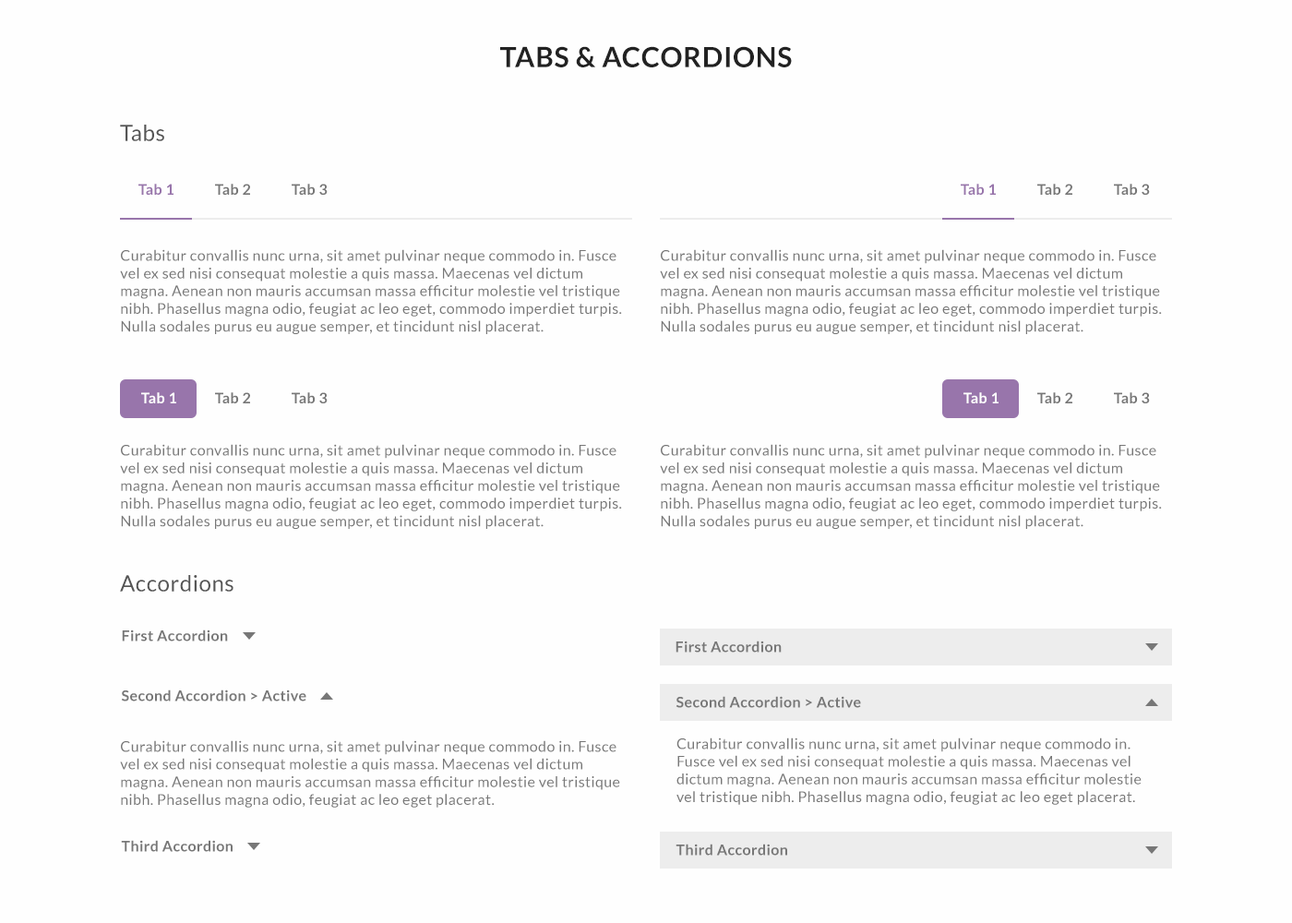
<style>
.page{position:relative;width:1292px;height:923px;background:#fefefe}
.page>*{position:absolute;margin:0}
.t1{font:27.7px "Lato-Bold";letter-spacing:0.025em;color:#222222}
.t2{font:22.1px "Lato-Regular";letter-spacing:0.025em;color:#555555}
.t3{font:14.8px "Lato-Bold";letter-spacing:0.025em;color:#9875ab}
.t4{font:14.8px "Lato-Bold";letter-spacing:0.025em;color:#777777}
.t5{font:14.8px "Lato-Regular";letter-spacing:0.025em;color:#777777}
.t6{font:14.8px "Lato-Bold";letter-spacing:0.025em;color:#ffffff}
</style>
<div class="page">
<p class="t1" style="left:500px;top:46px;width:292px;height:21px">TABS &amp; ACCORDIONS</p>
<p class="t2" style="left:120px;top:125px;width:44px;height:16px">Tabs</p>
<p class="t3" style="left:138px;top:184px;width:36px;height:11px">Tab 1</p>
<p class="t4" style="left:215px;top:184px;width:35px;height:11px">Tab 2</p>
<p class="t4" style="left:292px;top:184px;width:36px;height:11px">Tab 3</p>
<p class="t3" style="left:961px;top:184px;width:35px;height:11px">Tab 1</p>
<p class="t4" style="left:1037px;top:184px;width:35px;height:11px">Tab 2</p>
<p class="t4" style="left:1114px;top:184px;width:36px;height:11px">Tab 3</p>
<p class="t5" style="left:120px;top:249px;width:502px;height:85px">Curabitur convallis nunc urna, sit amet pulvinar neque commodo in. Fusce vel ex sed nisi consequat molestie a quis massa. Maecenas vel dictum magna. Aenean non mauris accumsan massa efficitur molestie vel tristique nibh. Phasellus magna odio, feugiat ac leo eget, commodo imperdiet turpis. Nulla sodales purus eu augue semper, et tincidunt nisl placerat.</p>
<p class="t5" style="left:660px;top:249px;width:502px;height:85px">Curabitur convallis nunc urna, sit amet pulvinar neque commodo in. Fusce vel ex sed nisi consequat molestie a quis massa. Maecenas vel dictum magna. Aenean non mauris accumsan massa efficitur molestie vel tristique nibh. Phasellus magna odio, feugiat ac leo eget, commodo imperdiet turpis. Nulla sodales purus eu augue semper, et tincidunt nisl placerat.</p>
<p class="t6" style="left:141px;top:392px;width:35px;height:11px">Tab 1</p>
<p class="t4" style="left:215px;top:392px;width:35px;height:11px">Tab 2</p>
<p class="t4" style="left:292px;top:392px;width:36px;height:11px">Tab 3</p>
<p class="t6" style="left:964px;top:392px;width:35px;height:11px">Tab 1</p>
<p class="t4" style="left:1037px;top:392px;width:35px;height:11px">Tab 2</p>
<p class="t4" style="left:1114px;top:392px;width:36px;height:11px">Tab 3</p>
<p class="t5" style="left:120px;top:444px;width:502px;height:85px">Curabitur convallis nunc urna, sit amet pulvinar neque commodo in. Fusce vel ex sed nisi consequat molestie a quis massa. Maecenas vel dictum magna. Aenean non mauris accumsan massa efficitur molestie vel tristique nibh. Phasellus magna odio, feugiat ac leo eget, commodo imperdiet turpis. Nulla sodales purus eu augue semper, et tincidunt nisl placerat.</p>
<p class="t5" style="left:660px;top:444px;width:502px;height:85px">Curabitur convallis nunc urna, sit amet pulvinar neque commodo in. Fusce vel ex sed nisi consequat molestie a quis massa. Maecenas vel dictum magna. Aenean non mauris accumsan massa efficitur molestie vel tristique nibh. Phasellus magna odio, feugiat ac leo eget, commodo imperdiet turpis. Nulla sodales purus eu augue semper, et tincidunt nisl placerat.</p>
<p class="t2" style="left:120px;top:575px;width:113px;height:17px">Accordions</p>
<p class="t4" style="left:122px;top:629px;width:106px;height:12px">First Accordion</p>
<p class="t4" style="left:676px;top:640px;width:106px;height:12px">First Accordion</p>
<p class="t4" style="left:121px;top:689px;width:185px;height:12px">Second Accordion &gt; Active</p>
<p class="t4" style="left:676px;top:696px;width:185px;height:12px">Second Accordion &gt; Active</p>
<p class="t5" style="left:676px;top:737px;width:466px;height:68px">Curabitur convallis nunc urna, sit amet pulvinar neque commodo in. Fusce vel ex sed nisi consequat molestie a quis massa. Maecenas vel dictum magna. Aenean non mauris accumsan massa efficitur molestie vel tristique nibh. Phasellus magna odio, feugiat ac leo eget placerat.</p>
<p class="t5" style="left:120px;top:740px;width:500px;height:68px">Curabitur convallis nunc urna, sit amet pulvinar neque commodo in. Fusce vel ex sed nisi consequat molestie a quis massa. Maecenas vel dictum magna. Aenean non mauris accumsan massa efficitur molestie vel tristique nibh. Phasellus magna odio, feugiat ac leo eget placerat.</p>
<p class="t4" style="left:121px;top:840px;width:112px;height:12px">Third Accordion</p>
<p class="t4" style="left:676px;top:844px;width:111px;height:12px">Third Accordion</p>
</div>
